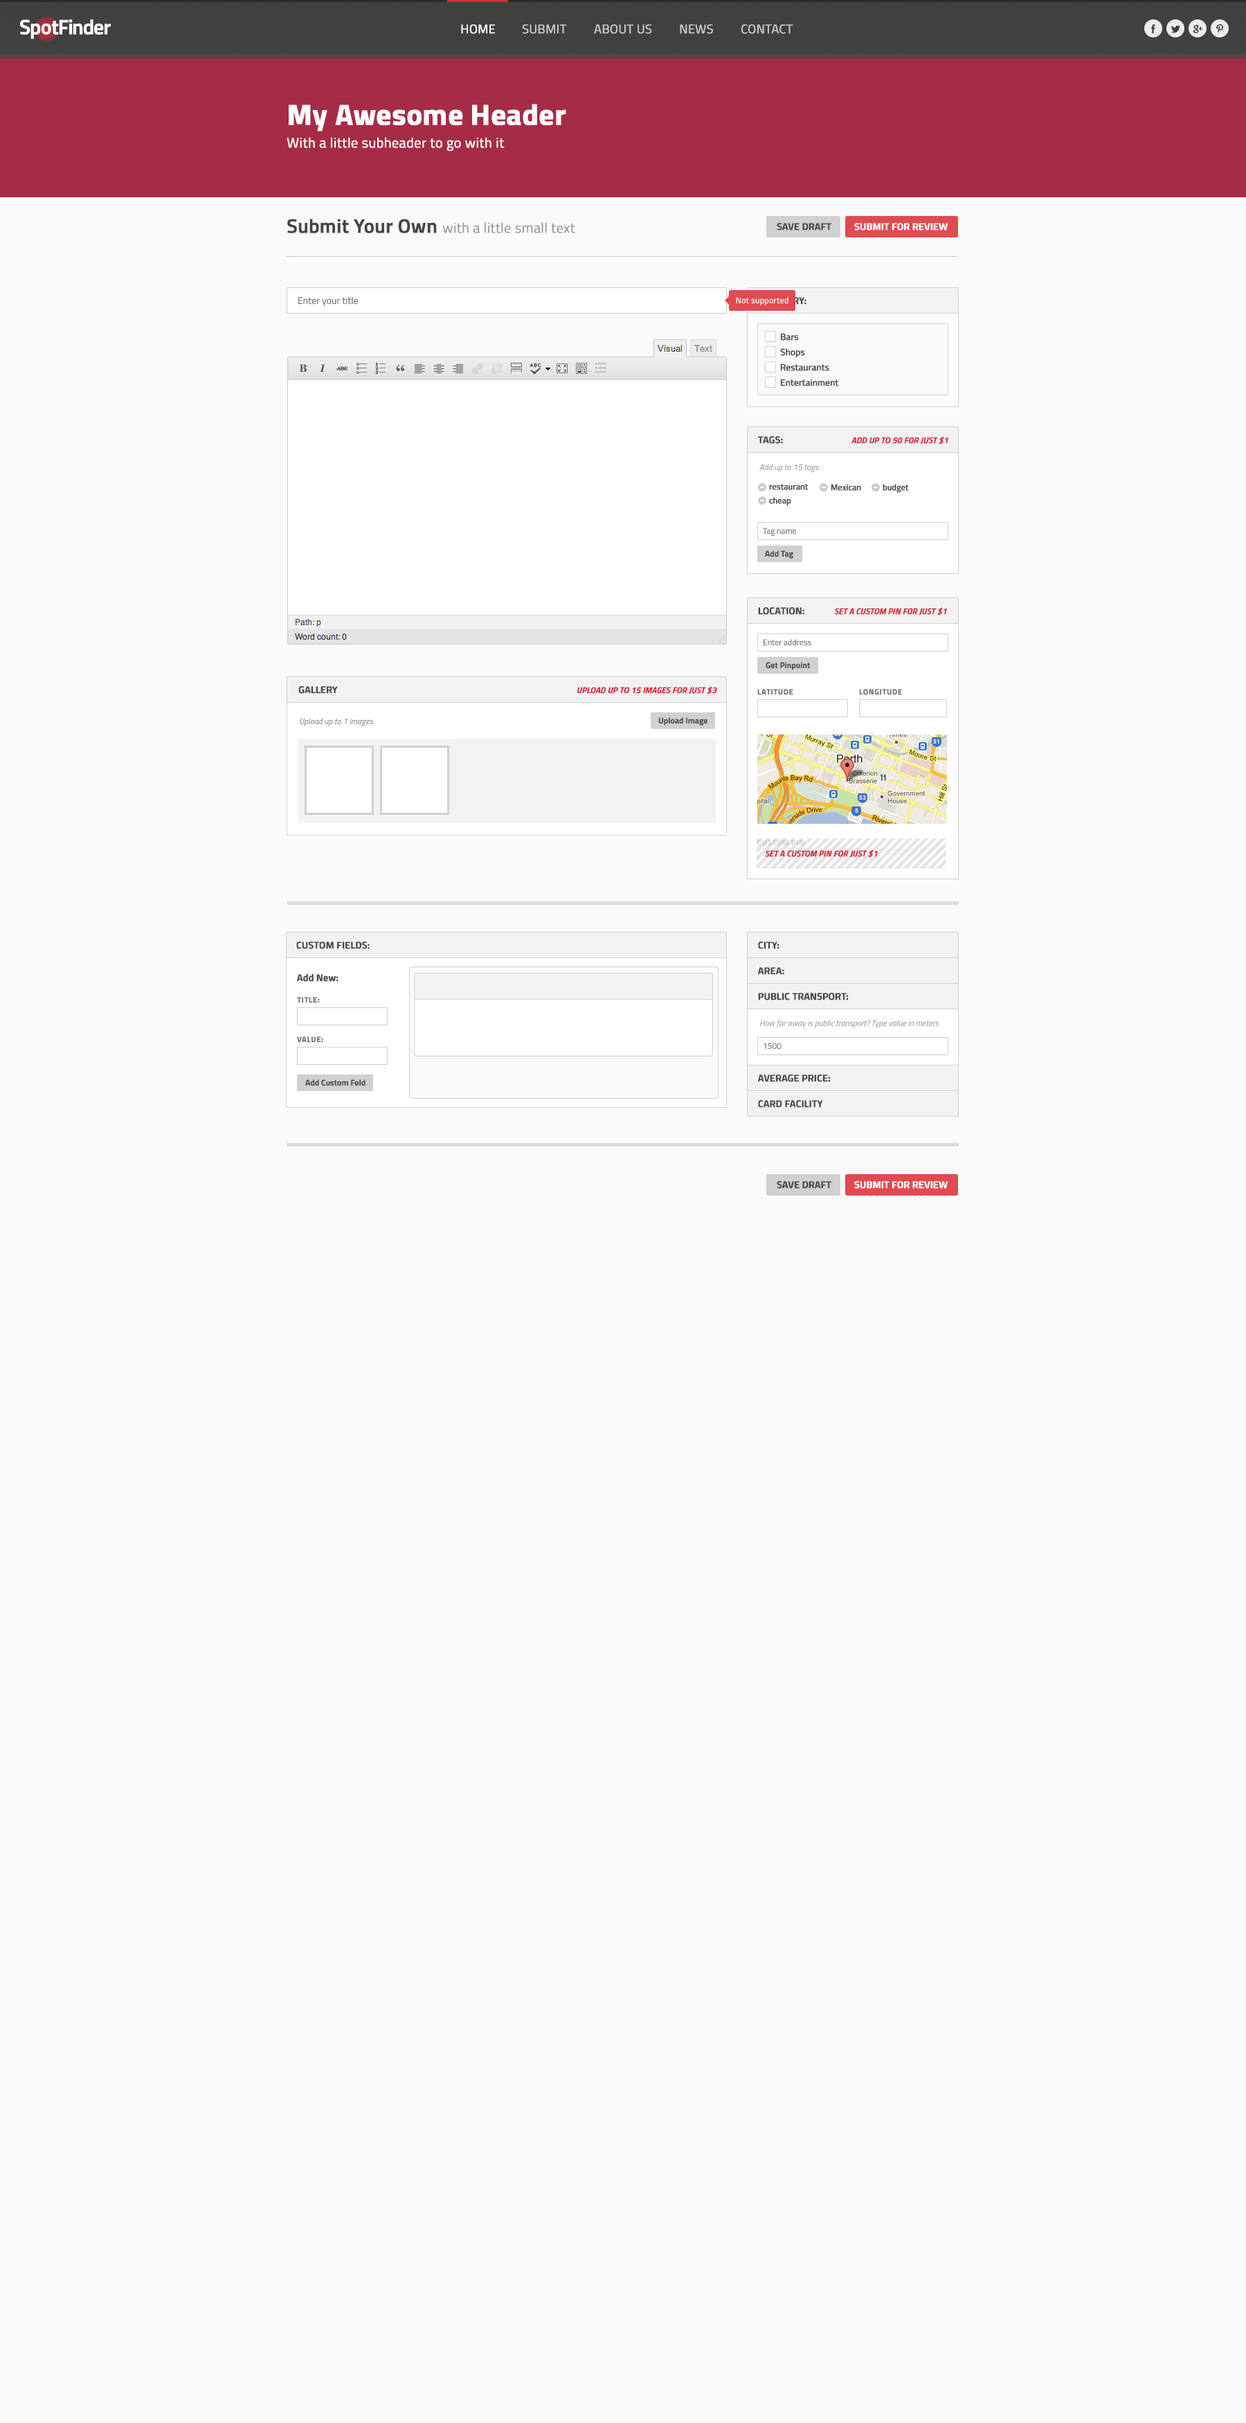
<style>
.page{position:relative;width:1246px;height:2423px;background:#fafafa}
.page>*{position:absolute;margin:0}
.t1{font:12.5px "TitilliumWeb-Regular";color:#ffffff;font-weight:bold}
.t2{font:12.5px "TitilliumWeb-Regular";color:#cacac8;font-weight:bold}
.t3{font:29.1px "TitilliumWeb-Bold";color:#ffffff;font-weight:bold}
.t4{font:13.8px "TitilliumWeb-Regular";color:#ffffff;font-weight:bold}
.t5{font:13.8px "TitilliumWeb-Light";color:#989493;font-weight:bold}
.t6{font:19.4px "TitilliumWeb-SemiBold";color:#484544;font-weight:bold}
.t7{font:9.7px "TitilliumWeb-SemiBold";color:#484544;text-transform:uppercase;font-weight:bold}
.t8{font:9.7px "TitilliumWeb-SemiBold";color:#ffffff;text-transform:uppercase;font-weight:bold}
.t9{font:9.7px "TitilliumWeb-Regular";color:#727272}
.t10{font:8.3px "TitilliumWeb-Regular";letter-spacing:0.025em;color:#ffffff}
.t11{font:9px "TitilliumWeb-Regular";color:#484544;font-weight:bold}
.t12{font:8.3px "TitilliumWeb-SemiBoldItalic";color:#da2639;text-transform:uppercase;font-weight:bold}
.t13{font:8.3px "TitilliumWeb-Italic";color:#a1a0a0}
.t14{font:8.3px "TitilliumWeb-Regular";color:#484544;font-weight:bold}
.t15{font:8.3px "TitilliumWeb-Regular";color:#727272}
.t16{font:8.3px "TitilliumWeb-Bold";color:#484544}
.t17{font:7.6px "TitilliumWeb-Bold";letter-spacing:0.04em;color:#727272;text-transform:uppercase;font-weight:bold}
.t18{font:8.3px "TitilliumWeb-Italic";color:#8e8c8c}
.t19{font:7.6px "TitilliumWeb-Bold";letter-spacing:0.04em;color:#cccccc;text-transform:uppercase;font-weight:bold}
.t20{font:9.7px "TitilliumWeb-SemiBold";color:#484544;font-weight:bold}
</style>
<div class="page">
<p class="t1" style="left:461px;top:24px;width:34px;height:10px">HOME</p>
<p class="t2" style="left:522px;top:24px;width:45px;height:10px">SUBMIT</p>
<p class="t2" style="left:594px;top:24px;width:58px;height:10px">ABOUT US</p>
<p class="t2" style="left:680px;top:24px;width:33px;height:10px">NEWS</p>
<p class="t2" style="left:741px;top:24px;width:52px;height:10px">CONTACT</p>
<p class="t3" style="left:289px;top:104px;width:277px;height:28px">My Awesome Header</p>
<p class="t4" style="left:287px;top:137px;width:218px;height:14px">With a little subheader to go with it</p>
<p class="t5" style="left:287px;top:219px;width:288px;height:14px"><span class="t6">Submit Your Own </span>with a little small text</p>
<p class="t7" style="left:777px;top:223px;width:55px;height:8px">SAve Draft</p>
<p class="t8" style="left:854px;top:223px;width:94px;height:8px">Submit For Review</p>
<p class="t9" style="left:298px;top:296px;width:61px;height:11px">Enter your title</p>
<p class="t10" style="left:736px;top:297px;width:53px;height:8px">Not supported</p>
<p class="t11" style="left:780px;top:333px;width:19px;height:8px">Bars</p>
<p class="t11" style="left:780px;top:348px;width:25px;height:10px">Shops</p>
<p class="t11" style="left:780px;top:363px;width:49px;height:8px">Restaurants</p>
<p class="t11" style="left:780px;top:379px;width:59px;height:7px">Entertainment</p>
<p class="t7" style="left:757px;top:436px;width:26px;height:8px">Tags:</p>
<p class="t12" style="left:852px;top:436px;width:96px;height:8px">Add up to 50 for just $1</p>
<p class="t13" style="left:759px;top:464px;width:61px;height:8px">Add up to 15 tags:</p>
<p class="t14" style="left:769px;top:484px;width:40px;height:6px">restaurant</p>
<p class="t14" style="left:831px;top:484px;width:30px;height:7px">Mexican</p>
<p class="t14" style="left:883px;top:484px;width:26px;height:9px">budget</p>
<p class="t14" style="left:769px;top:497px;width:22px;height:9px">cheap</p>
<p class="t15" style="left:763px;top:528px;width:34px;height:8px">Tag name</p>
<p class="t16" style="left:765px;top:550px;width:28px;height:9px">Add Tag</p>
<p class="t7" style="left:758px;top:607px;width:46px;height:8px">Location:</p>
<p class="t12" style="left:834px;top:607px;width:113px;height:8px">Set a Custom pin for Just $1</p>
<p class="t15" style="left:763px;top:639px;width:48px;height:7px">Enter address</p>
<p class="t16" style="left:766px;top:662px;width:45px;height:8px">Get Pinpoint</p>
<p class="t7" style="left:298px;top:686px;width:40px;height:8px">Gallery</p>
<p class="t12" style="left:577px;top:686px;width:140px;height:8px">Upload up to 15 images for just $3</p>
<p class="t17" style="left:757px;top:689px;width:36px;height:6px">Latitude</p>
<p class="t17" style="left:859px;top:689px;width:43px;height:6px">Longitude</p>
<p class="t18" style="left:300px;top:718px;width:75px;height:8px">Upload up to 1 images.</p>
<p class="t16" style="left:658px;top:717px;width:50px;height:9px">Upload Image</p>
<p class="t19" style="left:757px;top:840px;width:47px;height:6px">Custom Pin</p>
<p class="t12" style="left:765px;top:849px;width:113px;height:9px">Set a Custom pin for Just $1</p>
<p class="t7" style="left:296px;top:942px;width:74px;height:7px">Custom Fields:</p>
<p class="t7" style="left:758px;top:942px;width:22px;height:7px">City:</p>
<p class="t20" style="left:297px;top:973px;width:42px;height:9px">Add New:</p>
<p class="t7" style="left:758px;top:967px;width:26px;height:8px">Area:</p>
<p class="t17" style="left:297px;top:997px;width:23px;height:6px">Title:</p>
<p class="t7" style="left:758px;top:993px;width:91px;height:7px">Public Transport:</p>
<p class="t13" style="left:759px;top:1020px;width:180px;height:8px">How far away is public transport? Type value in meters</p>
<p class="t17" style="left:297px;top:1036px;width:26px;height:7px">Value:</p>
<p class="t15" style="left:764px;top:1043px;width:18px;height:7px">1500</p>
<p class="t16" style="left:305px;top:1079px;width:61px;height:7px">Add Custom Feld</p>
<p class="t7" style="left:758px;top:1074px;width:73px;height:8px">Average Price:</p>
<p class="t7" style="left:758px;top:1100px;width:65px;height:8px">Card Facility</p>
<p class="t7" style="left:777px;top:1181px;width:55px;height:8px">SAve Draft</p>
<p class="t8" style="left:854px;top:1181px;width:94px;height:8px">Submit For Review</p>
</div>
